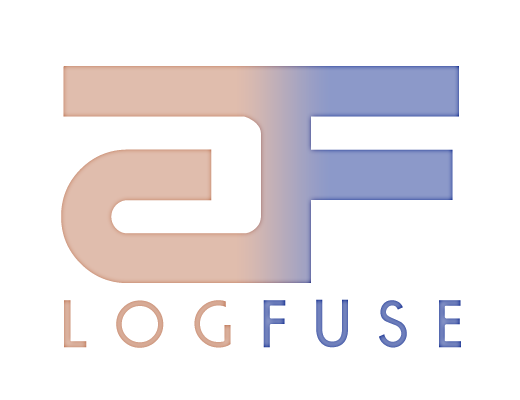
<style>
.page{position:relative;width:520px;height:400px;background:#ffffff}
.page>*{position:absolute;margin:0}
.t1{font:66px "Rondalo";letter-spacing:0.1em}
</style>
<div class="page">
<p class="t1" style="left:64px;top:299px;width:397px;height:49px">L O G F U S E</p>
</div>
